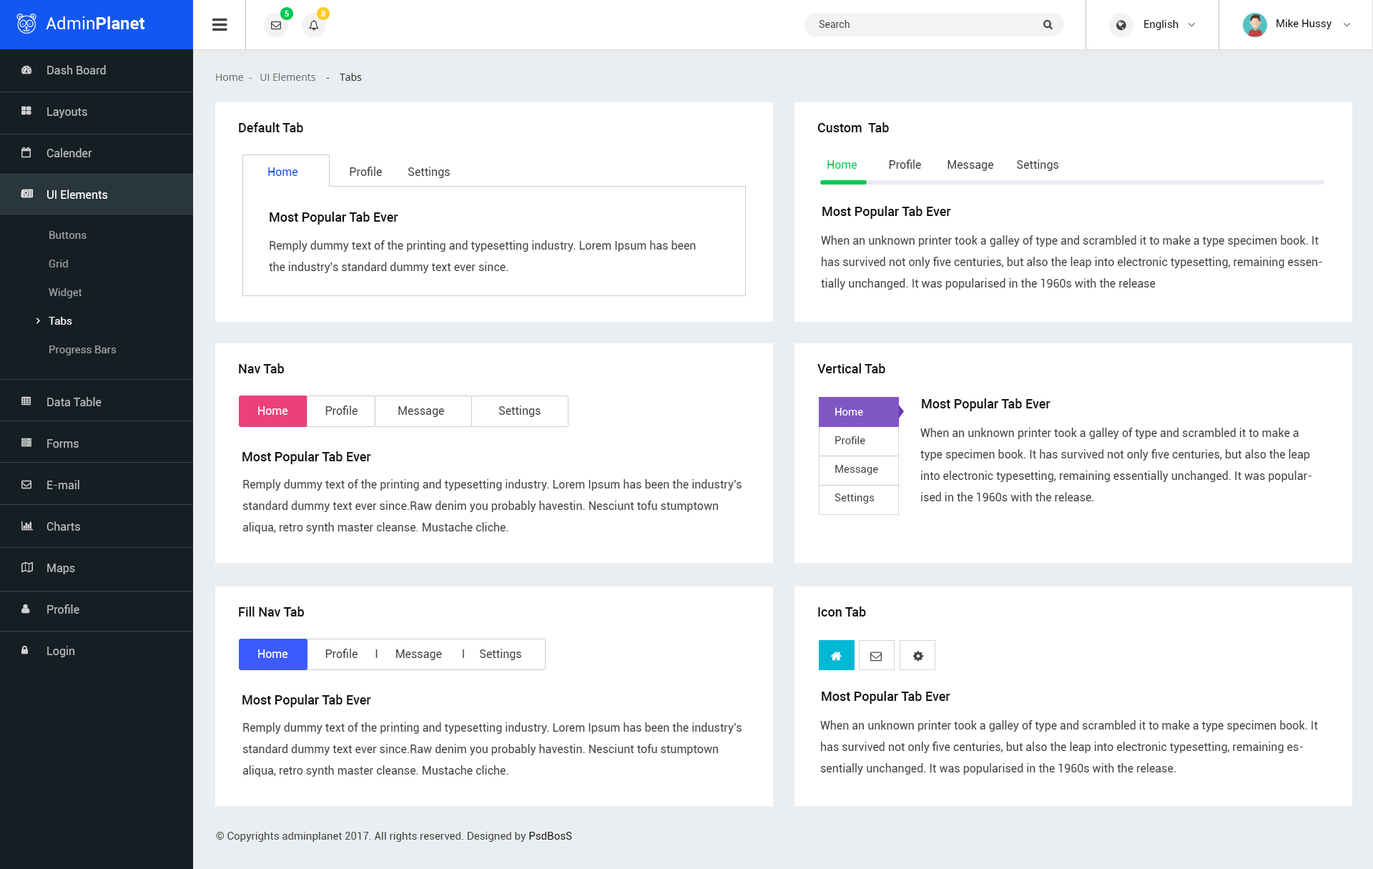
<style>
.page{position:relative;width:1373px;height:869px;background:#ffffff}
.page>*{position:absolute;margin:0}
.t1{font:7.9px "OpenSans-Semibold";color:#ffffff}
.t2{font:10px "Roboto-Regular";color:#444444}
.t3{font:10.7px "Roboto-Regular";color:#111111}
.t4{font:11.4px/41.5px "Roboto-Regular";color:#b9b9b9}
.t5{font:11.4px/41.5px "Roboto-Regular";color:#ffffff}
.t6{font:10px "OpenSans";color:#707070}
.t7{font:10px "OpenSans";color:#333333}
.t8{font:12.9px "Roboto-Medium";color:#111111}
.t9{font:11.4px "Roboto-Regular";color:#444444}
.t10{font:11.4px "Roboto-Regular";color:#00c853}
.t11{font:11.4px "Roboto-Regular";color:#1257f2}
.t12{font:10.7px/28.6px "Roboto-Regular";color:#a0a0a0}
.t13{font:10.7px/28.6px "Roboto-Regular";color:#ffffff}
.t14{font:11.4px/21.4px "Roboto-Regular";color:#444444}
.t15{font:11.4px "Roboto-Regular";color:#ffffff}
.t16{font:10.7px/28.6px "Roboto-Regular";color:#444444}
.t17{font:10.7px "Roboto-Regular";color:#444444}
</style>
<div class="page">
<p class="t1" style="left:285px;top:11px;width:4px;height:5px">5</p>
<p class="t1" style="left:321px;top:11px;width:4px;height:5px">8</p>
<p class="t2" style="left:819px;top:20px;width:30px;height:8px">Search</p>
<p class="t3" style="left:1144px;top:20px;width:34px;height:10px">English</p>
<p class="t3" style="left:1276px;top:19px;width:55px;height:10px">Mike Hussy</p>
<p class="t4" style="left:46px;top:65px;width:62px;height:592px">Dash Board<br>Layouts<br>Calender<br><span class="t5">UI Elements<br></span><br><br><br><br>Data Table<br>Forms<br>E-mail<br>Charts<br>Maps<br>Profile<br>Login</p>
<p class="t6" style="left:216px;top:73px;width:146px;height:8px">Home  -   UI Elements   <span class="t7"> -    Tabs</span></p>
<p class="t8" style="left:239px;top:122px;width:64px;height:10px">Default Tab</p>
<p class="t8" style="left:817px;top:122px;width:72px;height:10px">Custom  Tab</p>
<p class="t9" style="left:827px;top:159px;width:232px;height:12px"><span class="t10">Home           </span>Profile         Message        Settings</p>
<p class="t9" style="left:268px;top:167px;width:182px;height:11px"><span class="t11">Home                  </span>Profile         Settings</p>
<p class="t8" style="left:822px;top:206px;width:129px;height:13px">Most Popular Tab Ever</p>
<p class="t8" style="left:270px;top:212px;width:128px;height:12px">Most Popular Tab Ever</p>
<p class="t12" style="left:49px;top:231px;width:68px;height:124px">Buttons<br>Grid<br>Widget<br><span class="t13">Tabs<br></span>Progress Bars</p>
<p class="t14" style="left:269px;top:240px;width:427px;height:33px">Remply dummy text of the printing and typesetting industry. Lorem Ipsum has been the industry's standard dummy text ever since.</p>
<p class="t14" style="left:821px;top:235px;width:501px;height:55px">When an unknown printer took a galley of type and scrambled it to make a type specimen book. It has survived not only five centuries, but also the leap into electronic typesetting, remaining essentially unchanged. It was popularised in the 1960s with the release</p>
<p class="t8" style="left:239px;top:363px;width:45px;height:10px">Nav Tab</p>
<p class="t8" style="left:817px;top:363px;width:68px;height:10px">Vertical Tab</p>
<p class="t8" style="left:922px;top:398px;width:128px;height:13px">Most Popular Tab Ever</p>
<p class="t9" style="left:258px;top:405px;width:283px;height:12px"><span class="t15">Home             </span>Profile              Message                   Settings</p>
<p class="t16" style="left:834px;top:408px;width:44px;height:95px"><span class="t13">Home           <br></span>Profile         <br>Message        <br>Settings</p>
<p class="t14" style="left:920px;top:428px;width:391px;height:73px">When an unknown printer took a galley of type and scrambled it to make a type specimen book. It has survived not only five centuries, but also the leap into electronic typesetting, remaining essentially unchanged. It was popularised in the 1960s with the release.</p>
<p class="t8" style="left:242px;top:451px;width:129px;height:13px">Most Popular Tab Ever</p>
<p class="t14" style="left:242px;top:479px;width:499px;height:54px">Remply dummy text of the printing and typesetting industry. Lorem Ipsum has been the industry's standard dummy text ever since.Raw denim you probably havestin. Nesciunt tofu stumptown aliqua, retro synth master cleanse. Mustache cliche.</p>
<p class="t8" style="left:239px;top:606px;width:65px;height:10px">Fill Nav Tab</p>
<p class="t8" style="left:818px;top:606px;width:48px;height:10px">Icon Tab</p>
<p class="t9" style="left:258px;top:648px;width:263px;height:12px"><span class="t15">Home             </span>Profile      I      Message       I     Settings</p>
<p class="t8" style="left:242px;top:694px;width:129px;height:13px">Most Popular Tab Ever</p>
<p class="t8" style="left:821px;top:691px;width:129px;height:13px">Most Popular Tab Ever</p>
<p class="t14" style="left:242px;top:722px;width:499px;height:54px">Remply dummy text of the printing and typesetting industry. Lorem Ipsum has been the industry's standard dummy text ever since.Raw denim you probably havestin. Nesciunt tofu stumptown aliqua, retro synth master cleanse. Mustache cliche.</p>
<p class="t14" style="left:820px;top:720px;width:498px;height:54px">When an unknown printer took a galley of type and scrambled it to make a type specimen book. It has survived not only five centuries, but also the leap into electronic typesetting, remaining essentially unchanged. It was popularised in the 1960s with the release.</p>
<p class="t17" style="left:216px;top:831px;width:356px;height:11px">© Copyrights adminplanet 2017. All rights reserved. Designed by <span class="t3">PsdBosS</span></p>
</div>
